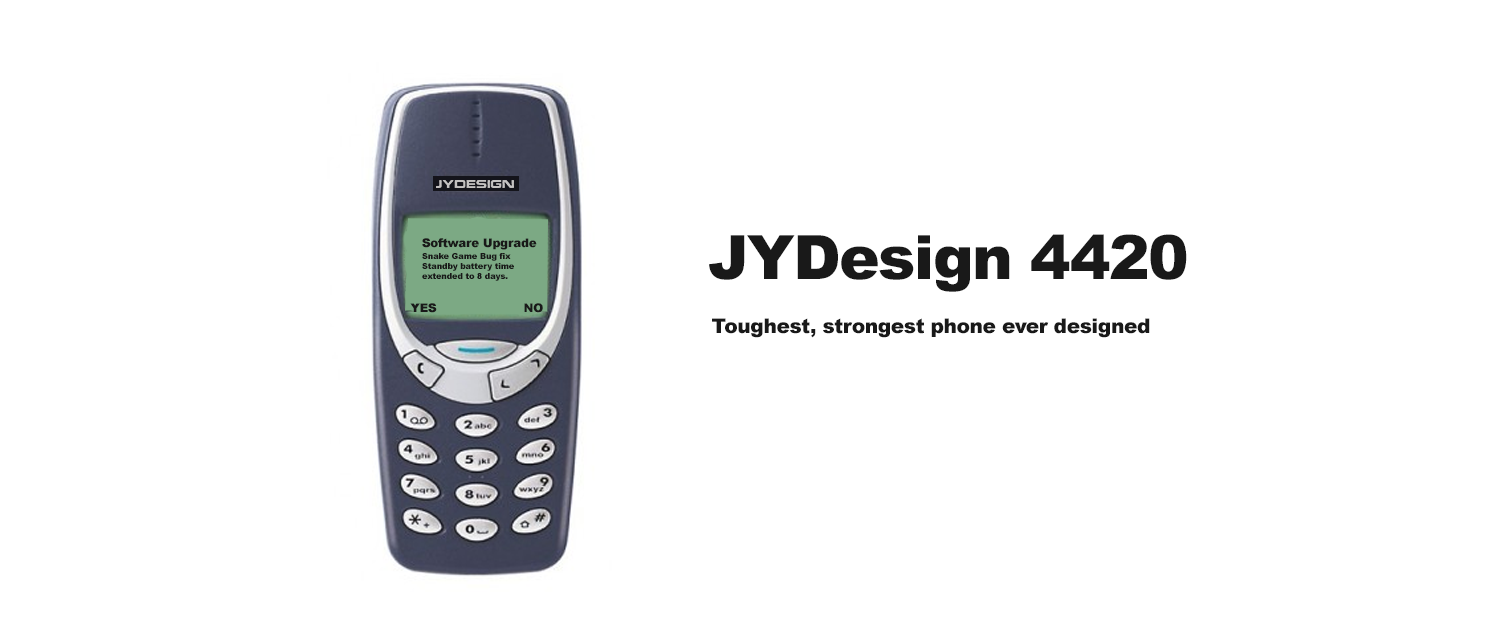
<style>
.page{position:relative;width:1500px;height:623px;background:#ffffff}
.page>*{position:absolute;margin:0}
.t1{font:12px "Arial-Black";letter-spacing:-0.025em;color:#191919}
.t2{font:61.1px "Arial-Black";letter-spacing:-0.025em;color:#191919}
.t3{font:8.4px "Arial-Black";letter-spacing:-0.025em;color:#191919}
.t4{font:20.3px "Arial-Black";letter-spacing:-0.025em;color:#191919}
</style>
<div class="page">
<p class="t1" style="left:422px;top:238px;width:115px;height:12px">Software Upgrade</p>
<p class="t2" style="left:709px;top:234px;width:478px;height:58px">JYDesign 4420</p>
<p class="t3" style="left:422px;top:253px;width:92px;height:28px">Snake Game Bug fix<br>Standby battery time <br>extended to 8 days.</p>
<p class="t1" style="left:410px;top:303px;width:27px;height:10px">YES</p>
<p class="t1" style="left:524px;top:303px;width:19px;height:10px">NO</p>
<p class="t4" style="left:712px;top:318px;width:438px;height:20px">Toughest, strongest phone ever designed</p>
</div>
